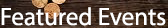
<style>
.page{position:relative;width:168px;height:28px}
.page>*{position:absolute;margin:0}
.t1{font:25px "MyriadPro-Regular";color:#ffffff}
</style>
<div class="page">
<p class="t1" style="left:1px;top:7px;width:165px;height:19px">Featured Events</p>
</div>
